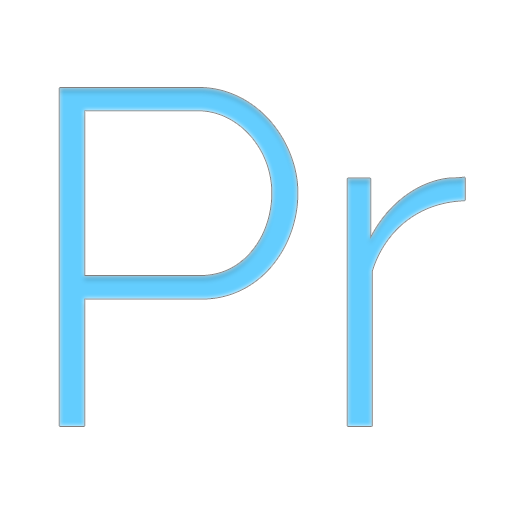
<style>
.page{position:relative;width:512px;height:512px;background:#ffffff}
.page>*{position:absolute;margin:0}
.t1{font:475.5px "Raleway-Light";color:#63cdfe}
</style>
<div class="page">
<p class="t1" style="left:59px;top:88px;width:406px;height:338px">Pr</p>
</div>
